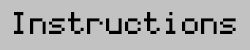
<style>
.page{position:relative;width:250px;height:50px;background:#c2c2c2}
.page>*{position:absolute;margin:0}
.t1{font:50px "Coder's-Crux";color:#000000}
</style>
<div class="page">
<p class="t1" style="left:14px;top:12px;width:222px;height:22px">Instructions</p>
</div>
